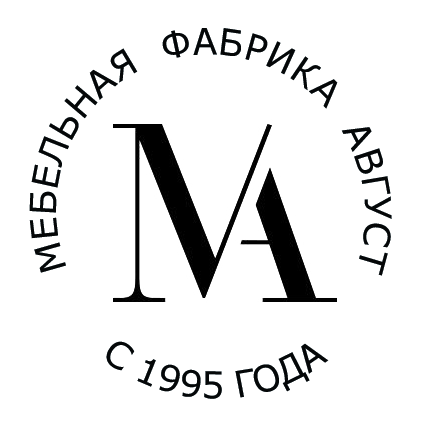
<style>
.page{position:relative;width:422px;height:428px;background:#ffffff}
.page>*{position:absolute;margin:0}
.t1{font:36px "Verdana";color:#050708;text-transform:uppercase}
</style>
<div class="page">
<p class="t1" style="left:29px;top:28px;width:363px;height:248px;rotate:-111deg">Мебельная  фабрика  Август</p>
<p class="t1" style="left:106px;top:341px;width:223px;height:58px;rotate:-137deg">с 1995 года</p>
</div>
